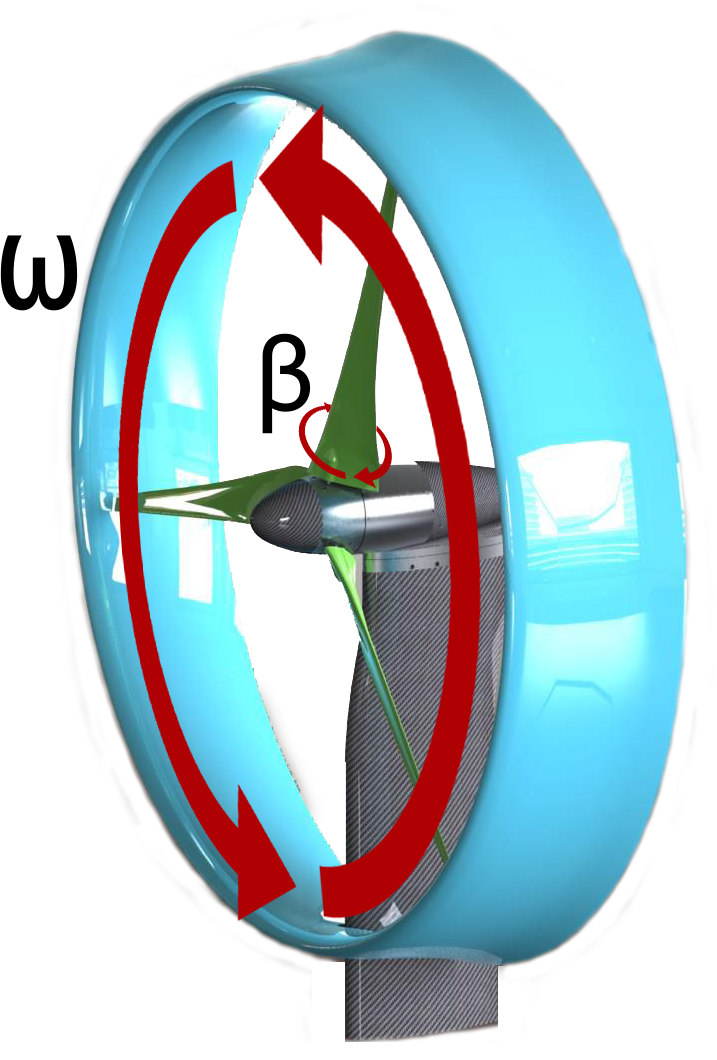
<style>
.page{position:relative;width:717px;height:1060px;background:#ffffff}
.page>*{position:absolute;margin:0}
.t1{font:150px "Consolas";color:#000000}
.t2{font:111.5px "Consolas";color:#000000}
</style>
<div class="page">
<p class="t1" style="left:0px;top:235px;width:78px;height:76px">ω</p>
<p class="t2" style="left:262px;top:333px;width:49px;height:101px">β</p>
</div>
